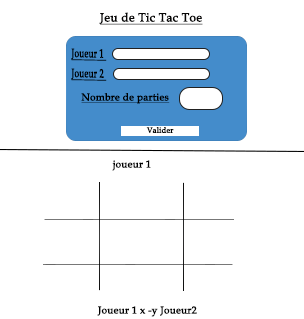
<style>
.page{position:relative;width:304px;height:319px;background:#ffffff}
.page>*{position:absolute;margin:0}
.t1{font:12px "BookAntiqua";color:#080707;font-weight:bold;text-decoration:underline}
.t2{font:12px "BookAntiqua";color:#000000;font-weight:bold;text-decoration:underline;scale:0.69 1}
.t3{font:10px "BookAntiqua";color:#000000;font-weight:bold;text-decoration:underline}
.t4{font:7.6px "BookAntiqua";color:#000000;font-weight:bold}
.t5{font:10px "BookAntiqua";color:#000000;font-weight:bold}
</style>
<div class="page">
<p class="t1" style="left:99px;top:12px;width:104px;height:13px">Jeu de Tic Tac Toe</p>
<p class="t2" style="left:71px;top:48px;width:36px;height:13px;rotate:1deg">Joueur 1</p>
<p class="t2" style="left:71px;top:68px;width:36px;height:13px;rotate:1deg">Joueur 2</p>
<p class="t3" style="left:81px;top:93px;width:89px;height:11px">Nombre de parties</p>
<p class="t4" style="left:146px;top:127px;width:28px;height:6px">Valider</p>
<p class="t5" style="left:112px;top:160px;width:39px;height:11px">joueur 1</p>
<p class="t5" style="left:97px;top:306px;width:100px;height:11px">Joueur 1 x -y Joueur2</p>
</div>
